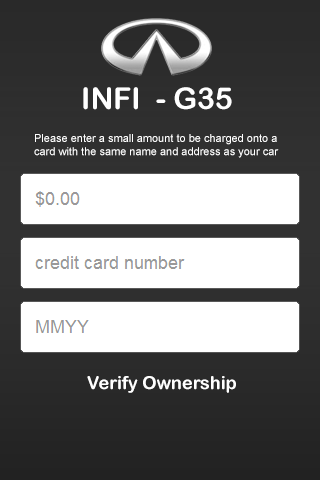
<style>
.page{position:relative;width:320px;height:480px;background:#ffffff}
.page>*{position:absolute;margin:0}
.t1{font:30px "ArialRoundedMTBold";color:#ffffff}
.t2{font:11px "ArialMT";color:#ffffff}
.t3{font:18px "ArialRoundedMTBold";color:#ffffff}
</style>
<div class="page">
<p class="t1" style="left:83px;top:87px;width:149px;height:23px">INFI  - G35</p>
<p class="t2" style="left:34px;top:134px;width:245px;height:24px">Please enter a small amount to be charged onto a<br>card with the same name and address as your car</p>
<p class="t3" style="left:87px;top:376px;width:149px;height:17px">Verify Ownership</p>
</div>
